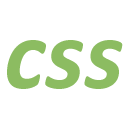
<style>
.page{position:relative;width:128px;height:128px;background:#ffffff}
.page>*{position:absolute;margin:0}
.t1{font:100px "Calibri-BoldItalic";color:#8cbc61}
</style>
<div class="page">
<p class="t1" style="left:7px;top:40px;width:116px;height:49px">css</p>
</div>
